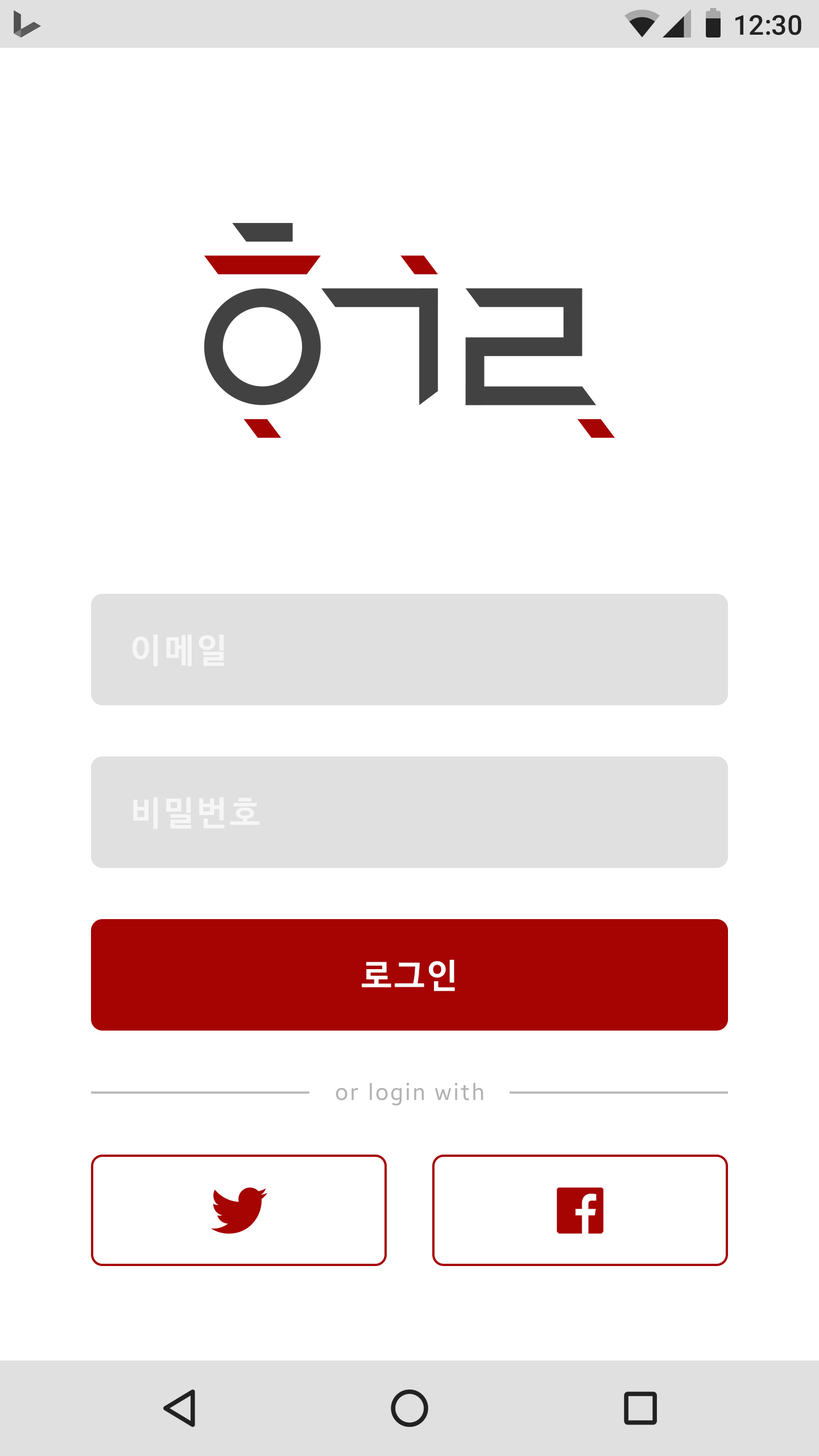
<style>
.page{position:relative;width:819px;height:1456px;background:#ffffff}
.page>*{position:absolute;margin:0}
.t1{font:27.3px "Roboto-Medium";color:#212121}
.t2{font:34.1px "NanumBarunGothicBold";letter-spacing:0.075em;color:#ffffff}
.t3{font:22.7px "BreezeSans";letter-spacing:0.075em;color:#b2b2b2}
</style>
<div class="page">
<p class="t1" style="left:735px;top:15px;width:66px;height:20px">12:30</p>
<p class="t2" style="left:133px;top:634px;width:92px;height:33px;opacity:0.7">이메일</p>
<p class="t2" style="left:133px;top:797px;width:127px;height:32px;opacity:0.7">비밀번호</p>
<p class="t2" style="left:362px;top:959px;width:93px;height:32px">로그인</p>
<p class="t3" style="left:336px;top:1083px;width:147px;height:23px">or login with</p>
</div>
